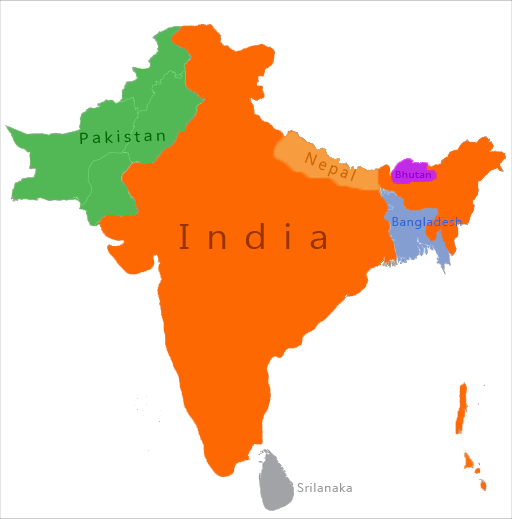
<style>
.page{position:relative;width:512px;height:519px;background:#ffffff}
.page>*{position:absolute;margin:0}
.t1{font:15.7px "MicrosoftNewTaiLue";letter-spacing:0.185em;color:#006600;scale:1.12 1}
.t2{font:16.3px "MicrosoftNewTaiLue";letter-spacing:0.205em;color:#cc6600;scale:0.95 1}
.t3{font:9.7px "MicrosoftNewTaiLue";letter-spacing:0.045em;color:#9900cc;scale:1.12 1}
.t4{font:11.6px "MicrosoftNewTaiLue";letter-spacing:0.045em;color:#3366cc;scale:1.11 1}
.t5{font:34.8px "MicrosoftNewTaiLue";letter-spacing:0.425em;color:#993300;scale:1.11 1}
.t6{font:11.6px "MicrosoftNewTaiLue";letter-spacing:0.045em;color:#999999;scale:1.11 1}
</style>
<div class="page">
<p class="t1" style="left:80px;top:130px;width:85px;height:15px;rotate:-2deg">Pakistan</p>
<p class="t2" style="left:304px;top:151px;width:53px;height:30px;rotate:21deg">Nepal</p>
<p class="t3" style="left:395px;top:171px;width:36px;height:7px">Bhutan</p>
<p class="t4" style="left:392px;top:217px;width:70px;height:12px">Bangladesh</p>
<p class="t5" style="left:179px;top:223px;width:147px;height:26px">India</p>
<p class="t6" style="left:297px;top:483px;width:55px;height:9px">Srilanaka</p>
</div>
